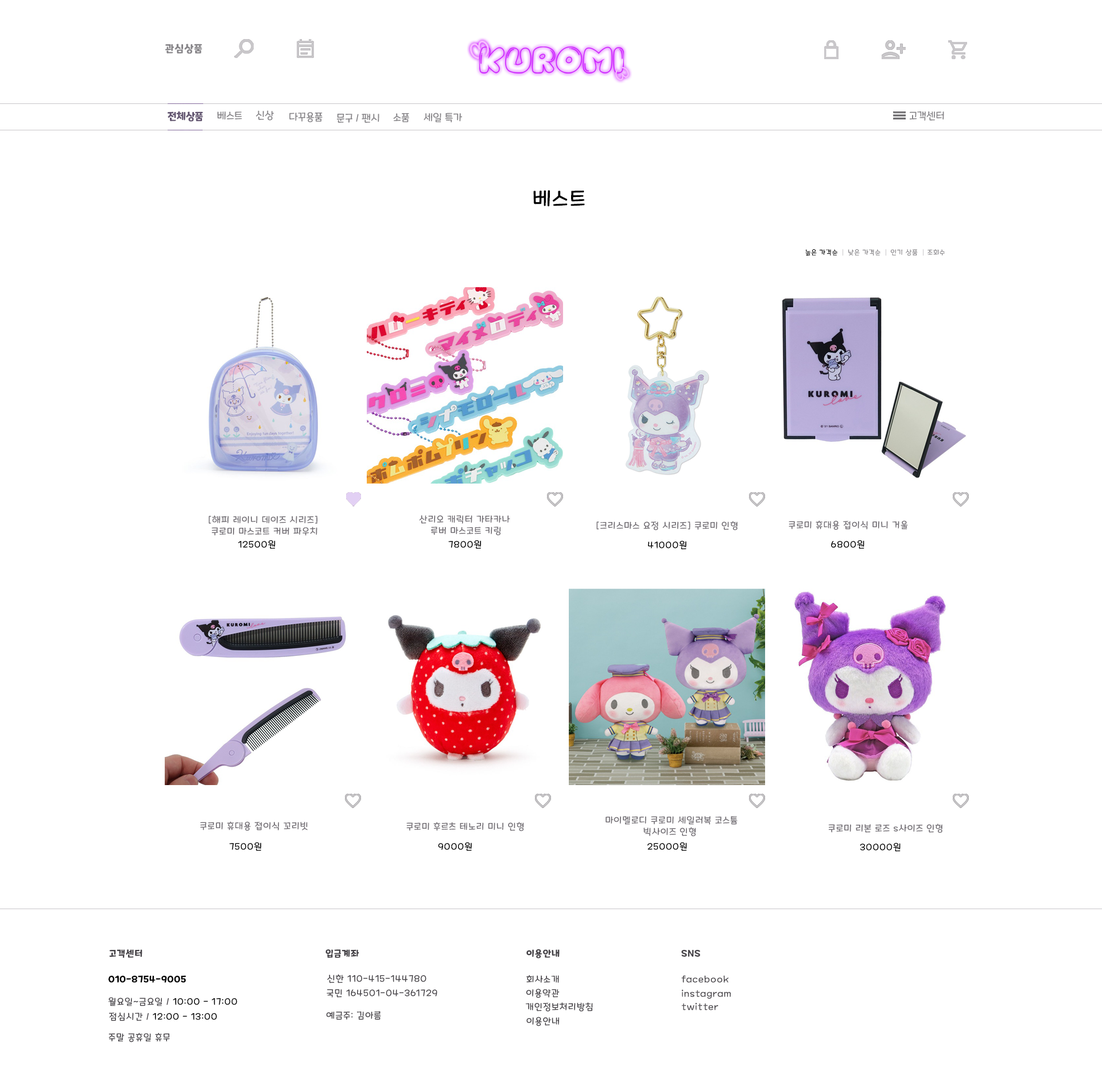
<style>
.page{position:relative;width:1102px;height:1082px;background:#ffffff}
.page>*{position:absolute;margin:0}
.t1{font:10.3px "MaplestoryBold";letter-spacing:0.06em;color:#878589}
.t2{font:10.3px "MaplestoryBold";color:#645772}
.t3{font:10.3px "MaplestoryLight";color:#878589}
.t4{font:20.7px "MaplestoryLight";letter-spacing:0.06em;color:#000000}
.t5{font:6.9px "MaplestoryLight";letter-spacing:0.06em;color:#000000}
.t6{font:6.9px "MaplestoryLight";letter-spacing:0.06em;color:#878589}
.t7{font:9.2px/11.5px "MaplestoryLight";letter-spacing:0.06em;color:#716d73}
.t8{font:9.2px "MaplestoryLight";letter-spacing:0.06em;color:#716d73}
.t9{font:9.2px "MaplestoryLight";letter-spacing:0.06em;color:#000000}
.t10{font:9.2px "MaplestoryBold";letter-spacing:0.06em;color:#464348}
.t11{font:9.2px "MaplestoryBold";letter-spacing:0.06em;color:#000000}
.t12{font:9.2px "MaplestoryLight";letter-spacing:0.06em;color:#464348}
</style>
<div class="page">
<p class="t1" style="left:165px;top:44px;width:37px;height:10px">관심상품</p>
<p class="t2" style="left:168px;top:111px;width:35px;height:11px">전체상품</p>
<p class="t3" style="left:217px;top:111px;width:25px;height:9px">베스트</p>
<p class="t3" style="left:256px;top:110px;width:18px;height:11px">신상</p>
<p class="t3" style="left:289px;top:112px;width:34px;height:10px">다꾸용품</p>
<p class="t3" style="left:337px;top:114px;width:43px;height:9px">문구 / 팬시</p>
<p class="t3" style="left:393px;top:113px;width:16px;height:9px">소품</p>
<p class="t3" style="left:424px;top:113px;width:38px;height:9px">세일 특가</p>
<p class="t3" style="left:910px;top:111px;width:34px;height:10px">고객센터</p>
<p class="t4" style="left:533px;top:190px;width:52px;height:17px">베스트</p>
<p class="t5" style="left:806px;top:249px;width:32px;height:6px">높은 가격순</p>
<p class="t6" style="left:848px;top:249px;width:33px;height:6px">낮은 가격순</p>
<p class="t6" style="left:891px;top:249px;width:27px;height:7px">인기 상품</p>
<p class="t6" style="left:928px;top:249px;width:17px;height:6px">조회수</p>
<p class="t7" style="left:208px;top:515px;width:110px;height:21px;text-align:center">[해피 레이니 데이즈 시리즈] <br>쿠로미 마스코트 커버 파우치</p>
<p class="t7" style="left:419px;top:515px;width:91px;height:20px;text-align:center">산리오 캐릭터 가타카나 <br>루버 마스코트 키링</p>
<p class="t8" style="left:597px;top:521px;width:141px;height:9px">[크리스마스 요정 시리즈] 쿠로미 인형</p>
<p class="t8" style="left:789px;top:520px;width:119px;height:10px">쿠로미 휴대용 접이식 미니 거울</p>
<p class="t9" style="left:238px;top:540px;width:38px;height:9px">12500원</p>
<p class="t9" style="left:448px;top:540px;width:33px;height:9px">7800원</p>
<p class="t9" style="left:648px;top:540px;width:39px;height:9px">41000원</p>
<p class="t9" style="left:831px;top:540px;width:34px;height:9px">6800원</p>
<p class="t8" style="left:200px;top:821px;width:108px;height:10px">쿠로미 휴대용 접이식 꼬리빗</p>
<p class="t8" style="left:406px;top:822px;width:118px;height:9px">쿠로미 후르츠 테노리 미니 인형</p>
<p class="t7" style="left:606px;top:816px;width:132px;height:20px;text-align:center">마이멜로디 쿠로미 세일러복 코스튬<br>빅사이즈 인형</p>
<p class="t8" style="left:828px;top:823px;width:115px;height:10px">쿠로미 리본 로즈 s사이즈 인형</p>
<p class="t9" style="left:229px;top:842px;width:32px;height:9px">7500원</p>
<p class="t9" style="left:438px;top:842px;width:34px;height:9px">9000원</p>
<p class="t9" style="left:648px;top:842px;width:39px;height:9px">25000원</p>
<p class="t9" style="left:860px;top:842px;width:41px;height:9px">30000원</p>
<p class="t10" style="left:109px;top:949px;width:33px;height:9px">고객센터</p>
<p class="t10" style="left:326px;top:949px;width:33px;height:9px">입금계좌</p>
<p class="t10" style="left:526px;top:948px;width:34px;height:10px">이용안내</p>
<p class="t10" style="left:682px;top:950px;width:18px;height:7px">SNS</p>
<p class="t11" style="left:109px;top:975px;width:77px;height:7px">010-8754-9005</p>
<p class="t12" style="left:327px;top:974px;width:100px;height:9px">신한 110-415-144780</p>
<p class="t12" style="left:526px;top:975px;width:33px;height:7px">회사소개</p>
<p class="t12" style="left:682px;top:975px;width:47px;height:7px">facebook</p>
<p class="t12" style="left:327px;top:989px;width:111px;height:8px">국민 164501-04-361729</p>
<p class="t12" style="left:526px;top:988px;width:34px;height:10px">이용약관</p>
<p class="t12" style="left:682px;top:989px;width:49px;height:9px">instagram</p>
<p class="t9" style="left:109px;top:997px;width:128px;height:9px"><span class="t12">월요일~금요일 / </span>10:00 - 17:00</p>
<p class="t12" style="left:526px;top:1002px;width:67px;height:9px">개인정보처리방침</p>
<p class="t9" style="left:109px;top:1012px;width:108px;height:9px"><span class="t12">점심시간 / </span>12:00 - 13:00</p>
<p class="t12" style="left:326px;top:1011px;width:55px;height:9px">예금주: 김아름</p>
<p class="t12" style="left:682px;top:1002px;width:37px;height:8px">twitter</p>
<p class="t12" style="left:526px;top:1016px;width:33px;height:10px">이용안내</p>
<p class="t12" style="left:109px;top:1032px;width:61px;height:10px">주말 공휴일 휴무</p>
</div>
